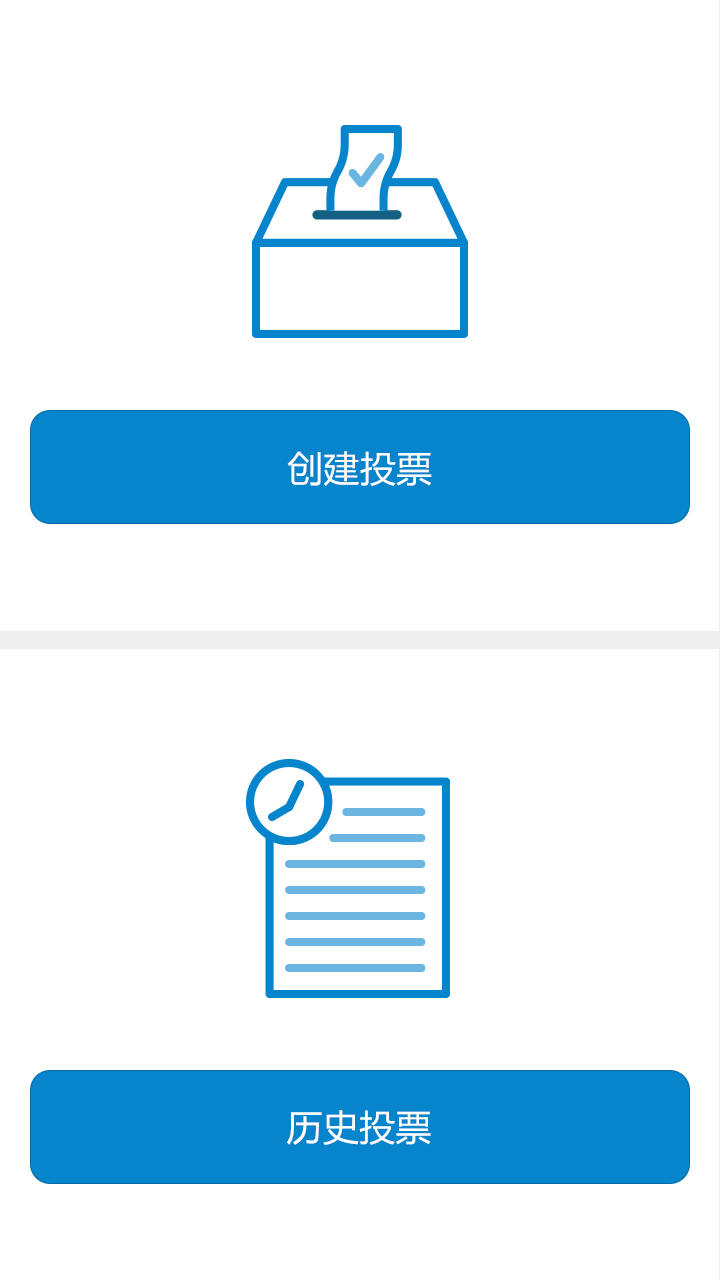
<style>
.page{position:relative;width:720px;height:1280px;background:#ffffff}
.page>*{position:absolute;margin:0}
.t1{font:36px "MicrosoftYaHeiUI";letter-spacing:0.01em;color:#ffffff}
</style>
<div class="page">
<p class="t1" style="left:287px;top:451px;width:145px;height:35px">创建投票</p>
<p class="t1" style="left:287px;top:1110px;width:144px;height:35px">历史投票</p>
</div>
